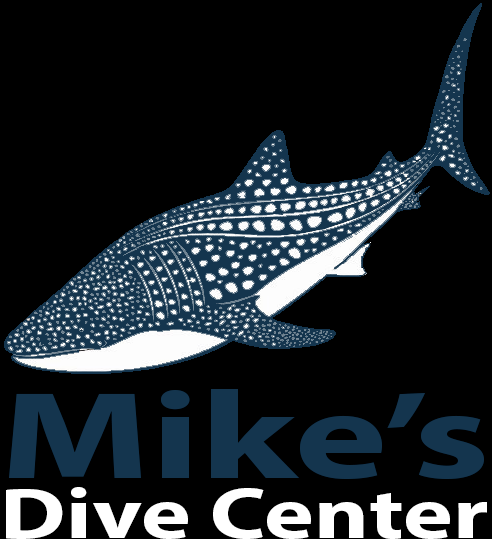
<style>
.page{position:relative;width:492px;height:539px;background:#000000}
.page>*{position:absolute;margin:0}
.t1{font:125px "MyriadPro-Bold";color:#14354e;scale:1.42 1}
.t2{font:72px "MyriadPro-Bold";color:#ffffff;scale:1.31 1}
</style>
<div class="page">
<p class="t1" style="left:9px;top:389px;width:475px;height:90px">Mike’s</p>
<p class="t2" style="left:6px;top:487px;width:481px;height:52px">Dive Center</p>
</div>
